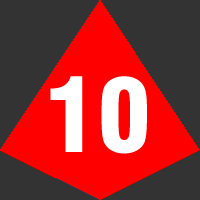
<style>
.page{position:relative;width:200px;height:200px;background:#333333}
.page>*{position:absolute;margin:0}
.t1{font:100px "Swiss721BT-BlackCondensed";color:#ffffff}
</style>
<div class="page">
<p class="t1" style="left:50px;top:76px;width:97px;height:78px">10</p>
</div>
